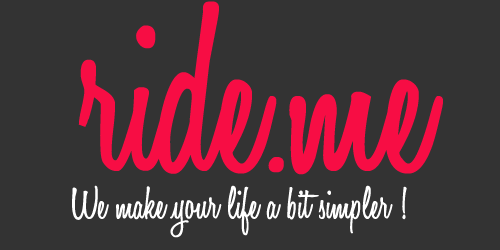
<style>
.page{position:relative;width:500px;height:250px;background:#333333}
.page>*{position:absolute;margin:0}
.t1{font:250px "HoneyScript-SemiBold";color:#f70d44}
.t2{font:48px "HoneyScript-SemiBold";color:#ffffff}
</style>
<div class="page">
<p class="t1" style="left:78px;top:1px;width:365px;height:174px">ride.me</p>
<p class="t2" style="left:72px;top:185px;width:335px;height:53px">We make your life a bit simpler !</p>
</div>
